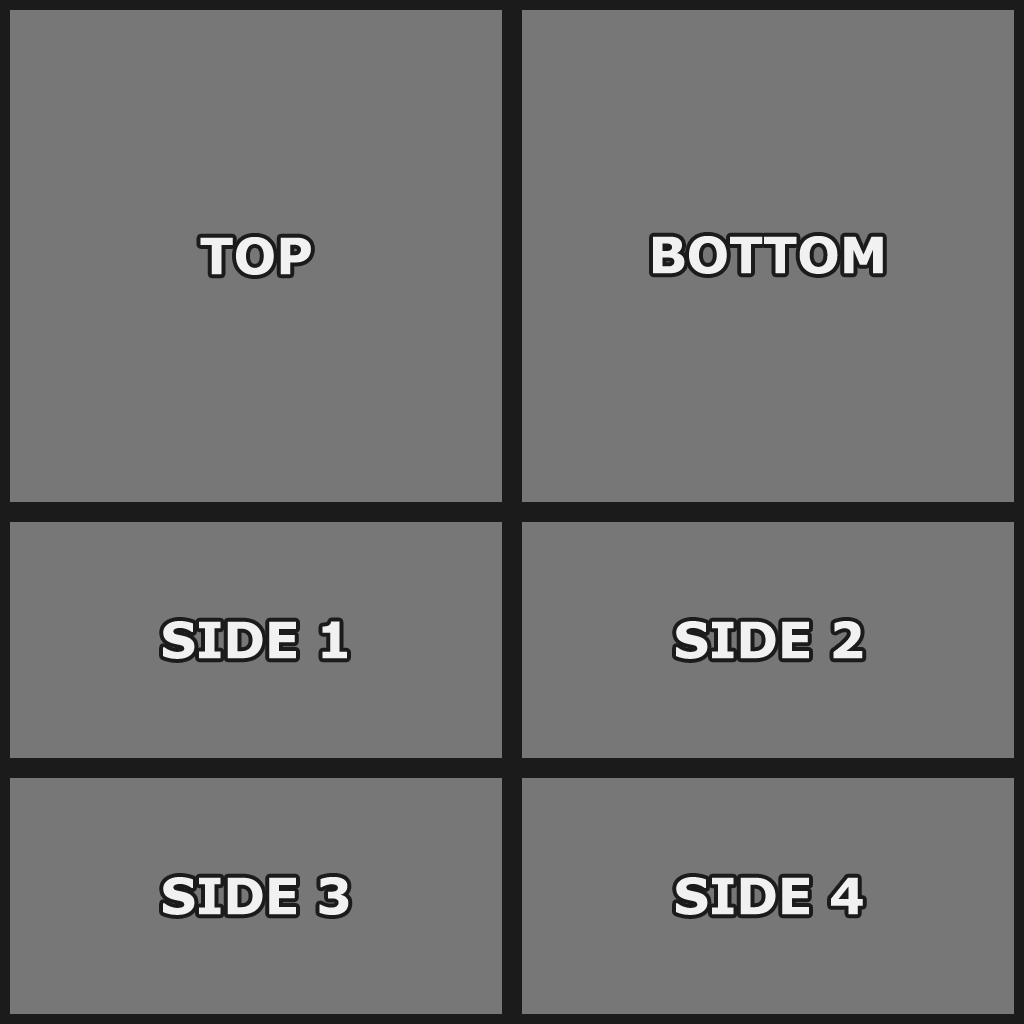
<style>
.page{position:relative;width:1024px;height:1024px;background:#777777}
.page>*{position:absolute;margin:0}
.t1{font:50px "Verdana-Bold";color:#f1f1f1;text-transform:uppercase}
</style>
<div class="page">
<p class="t1" style="left:200px;top:237px;width:111px;height:38px">Top</p>
<p class="t1" style="left:653px;top:236px;width:230px;height:38px">BOTTOM</p>
<p class="t1" style="left:163px;top:621px;width:184px;height:38px">SIDE 1</p>
<p class="t1" style="left:676px;top:621px;width:187px;height:38px">SIDE 2</p>
<p class="t1" style="left:163px;top:877px;width:186px;height:38px">SIDE 3</p>
<p class="t1" style="left:676px;top:877px;width:187px;height:38px">SIDE 4</p>
</div>
